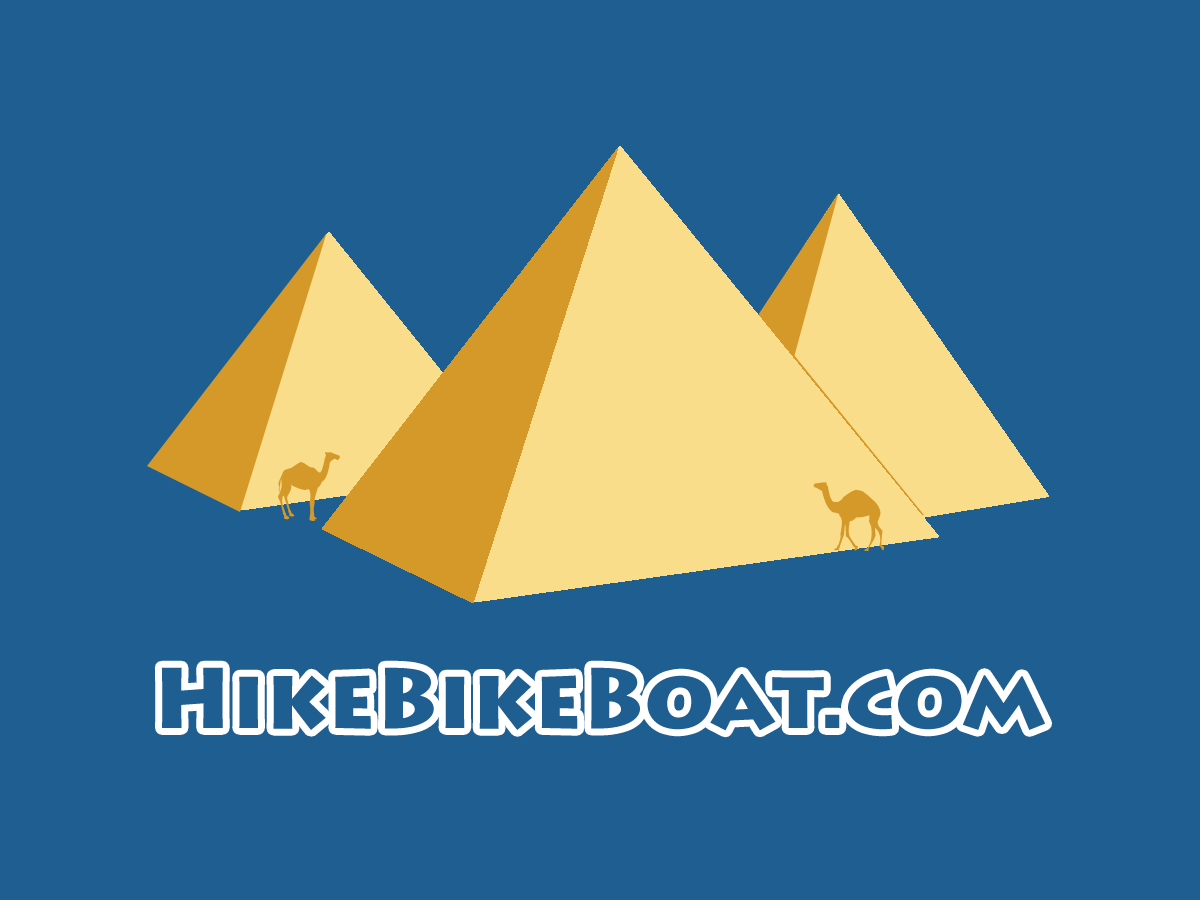
<style>
.page{position:relative;width:1200px;height:900px;background:#1f5e91}
.page>*{position:absolute;margin:0}
.t1{font:85px "LithosPro-Black";color:#1f5e91}
</style>
<div class="page">
<p class="t1" style="left:161px;top:667px;width:885px;height:64px">HikeBikeBoat.com</p>
</div>
